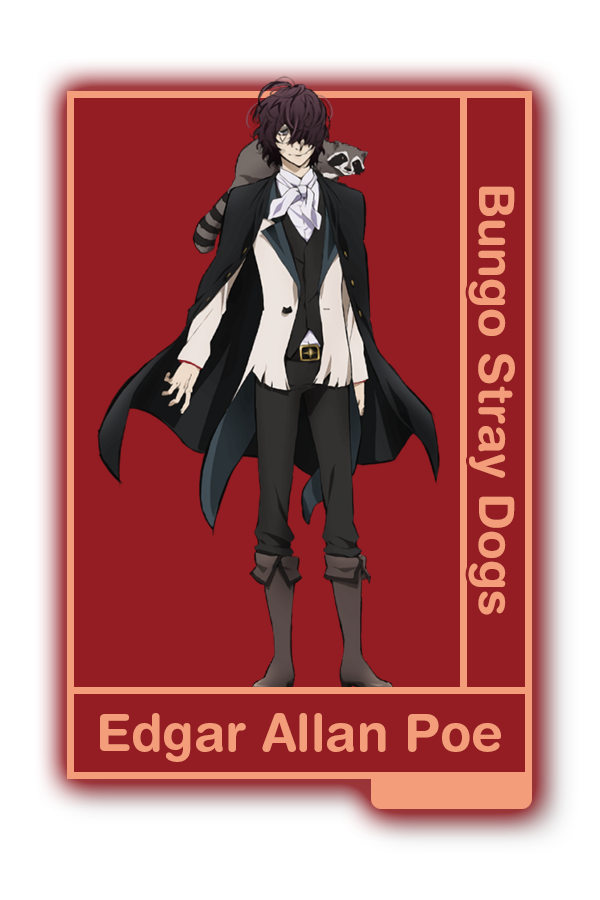
<style>
.page{position:relative;width:600px;height:900px;background:#941d23}
.page>*{position:absolute;margin:0}
.t1{font:48.8px "HelveticaRounded-Bold";color:#f39d7b}
.t2{font:51.5px "HelveticaRounded-Bold";color:#f39d7b}
</style>
<div class="page">
<p class="t1" style="left:468px;top:186px;width:47px;height:429px;rotate:90deg">Bungo Stray Dogs</p>
<p class="t2" style="left:100px;top:713px;width:401px;height:49px">Edgar Allan Poe</p>
</div>
